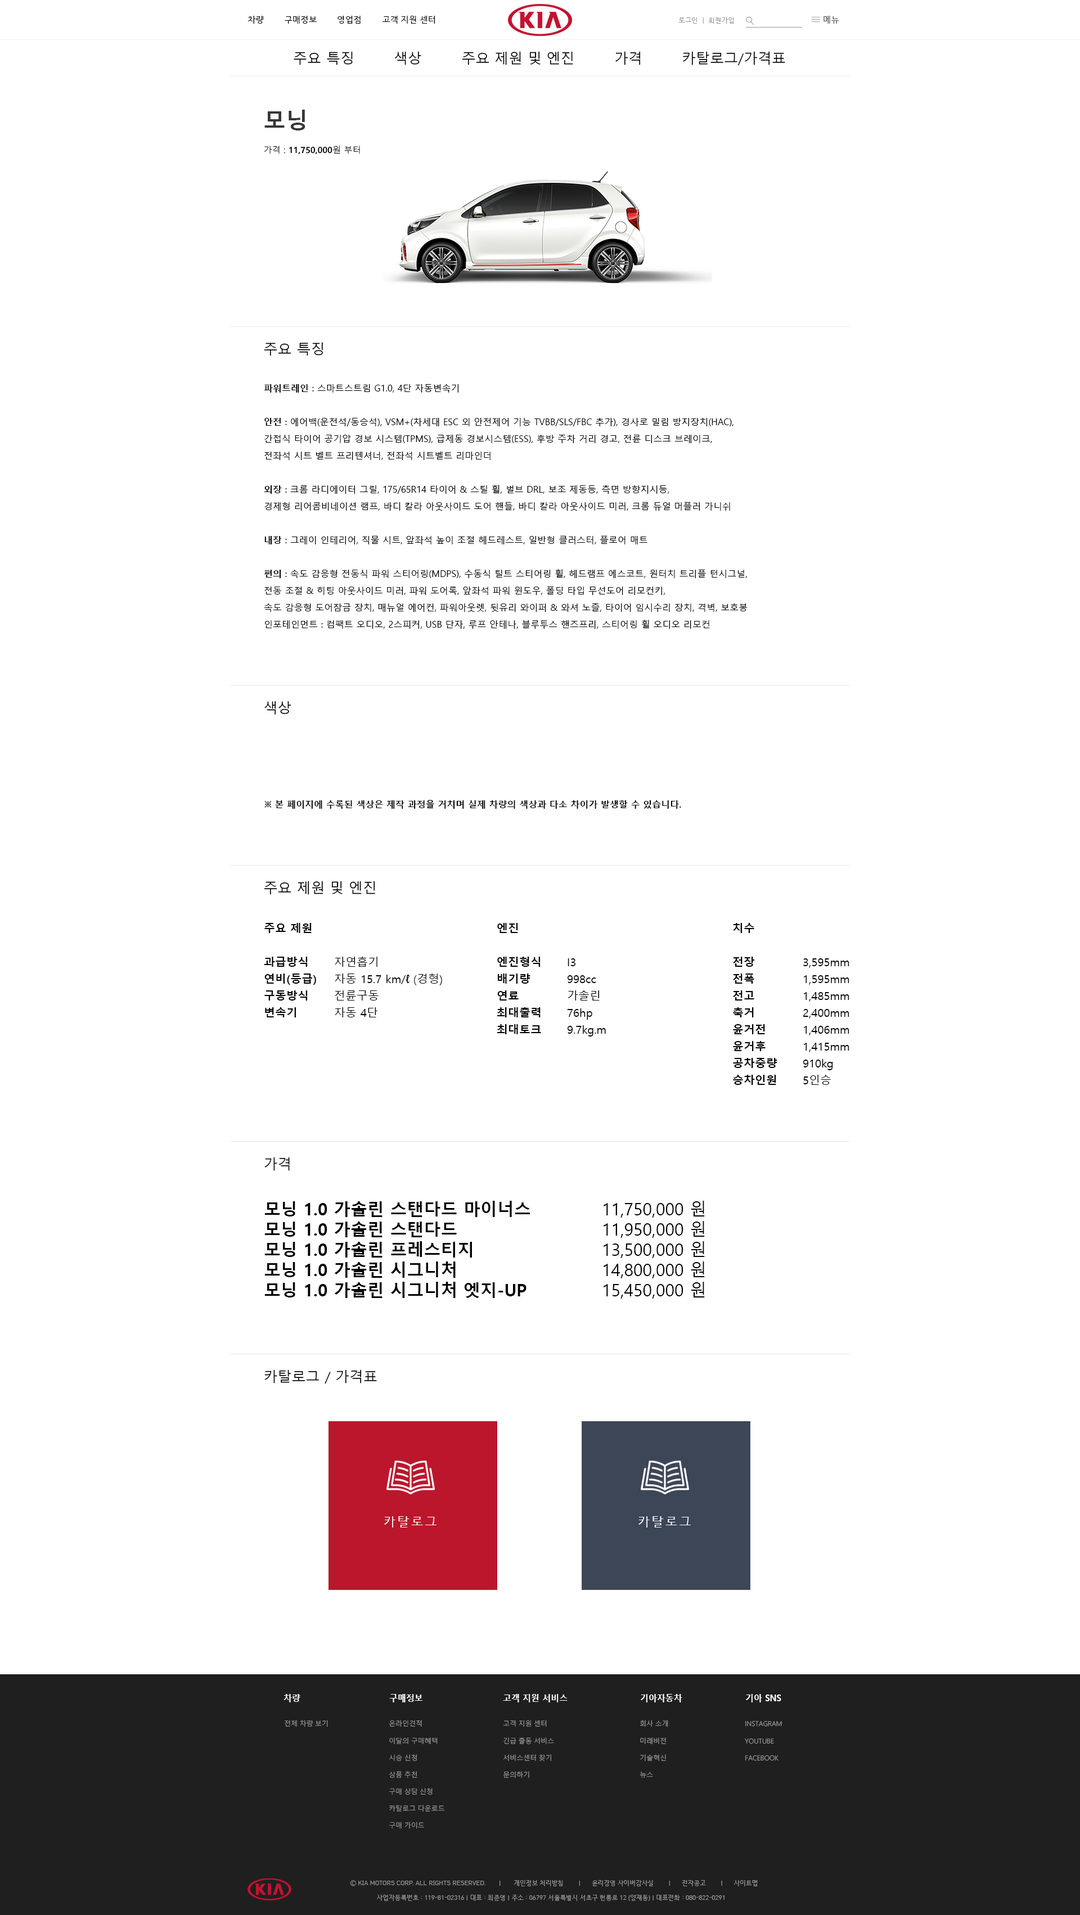
<style>
.page{position:relative;width:1080px;height:1915px;background:#ffffff}
.page>*{position:absolute;margin:0}
.t1{font:8.4px "HCRDotum";color:#000000}
.t2{font:6.8px "HCRDotum";color:#979797}
.t3{font:8.4px "HCRDotum";color:#4c4c4c}
.t4{font:14px "MalgunGothic";color:#000000}
.t5{font:22.5px "MalgunGothicBold";color:#363636}
.t6{font:8.4px "MalgunGothicBold";color:#000000}
.t7{font:8.4px "MalgunGothic";color:#000000}
.t8{font:13.9px "MalgunGothic";color:#000000}
.t9{font:9px/16.9px "MalgunGothic";color:#000000}
.t10{font:9px/16.9px "MalgunGothicBold";color:#000000}
.t11{font:9px "MalgunGothicBold";color:#000000}
.t12{font:11.2px/16.9px "MalgunGothicBold";color:#000000}
.t13{font:11.2px/16.9px "MalgunGothic";color:#000000}
.t14{font:16.9px "MalgunGothicBold";color:#000000}
.t15{font:16.9px "MalgunGothic";color:#000000}
.t16{font:12.5px "HCRDotum";letter-spacing:0.14em;color:#ffffff}
.t17{font:8.7px "MalgunGothicBold";color:#ffffff;scale:0.96 1}
.t18{font:6.8px "MalgunGothic-Semilight";color:#979797}
.t19{font:6.8px/17px "MalgunGothic-Semilight";color:#979797}
.t20{font:6.2px "HCRDotum";color:#999999}
</style>
<div class="page">
<p class="t1" style="left:248px;top:16px;width:187px;height:8px">차량        구매정보        영업점        고객 지원 센터</p>
<p class="t2" style="left:678px;top:17px;width:56px;height:7px">로그인  |  회원가입</p>
<p class="t3" style="left:824px;top:16px;width:15px;height:8px">메뉴</p>
<p class="t4" style="left:294px;top:51px;width:491px;height:15px">주요 특징        색상        주요 제원 및 엔진        가격        카탈로그/가격표</p>
<p class="t5" style="left:264px;top:110px;width:41px;height:20px">모닝</p>
<p class="t6" style="left:264px;top:146px;width:96px;height:9px"><span class="t7">가격 : </span>11,750,000<span class="t7">원 부터</span></p>
<p class="t8" style="left:264px;top:342px;width:59px;height:14px">주요 특징</p>
<p class="t9" style="left:264px;top:384px;width:484px;height:245px"><span class="t10">파워트레인</span> : 스마트스트림 G1.0, 4단 자동변속기<br><br><span class="t10">안전</span> : 에어백(운전석/동승석), VSM+(차세대 ESC 외 안전제어 기능 TVBB/SLS/FBC 추가), 경사로 밀림 방지장치(HAC),<br>간접식 타이어 공기압 경보 시스템(TPMS), 급제동 경보시스템(ESS), 후방 주차 거리 경고, 전륜 디스크 브레이크,<br>전좌석 시트 벨트 프리텐셔너, 전좌석 시트벨트 리마인더<br><br><span class="t10">외장</span> : 크롬 라디에이터 그릴, 175/65R14 타이어 &amp; 스틸 휠, 벌브 DRL, 보조 제동등, 측면 방향지시등,<br>경제형 리어콤비네이션 램프, 바디 칼라 아웃사이드 도어 핸들, 바디 칼라 아웃사이드 미러, 크롬 듀얼 머플러 가니쉬<br><br><span class="t10">내장</span> : 그레이 인테리어, 직물 시트, 앞좌석 높이 조절 헤드레스트, 일반형 클러스터, 플로어 매트<br><br><span class="t10">편의</span> : 속도 감응형 전동식 파워 스티어링(MDPS), 수동식 틸트 스티어링 휠, 헤드램프 에스코트, 원터치 트리플 턴시그널,<br>전동 조절 &amp; 히팅 아웃사이드 미러, 파워 도어록, 앞좌석 파워 윈도우, 폴딩 타입 무선도어 리모컨키,<br>속도 감응형 도어잠금 장치, 매뉴얼 에어컨, 파워아웃렛, 뒷유리 와이퍼 &amp; 와셔 노즐, 타이어 임시수리 장치, 격벽, 보호봉<br>인포테인먼트 : 컴팩트 오디오, 2스피커, USB 단자, 루프 안테나, 블루투스 핸즈프리, 스티어링 휠 오디오 리모컨</p>
<p class="t8" style="left:264px;top:701px;width:27px;height:14px">색상</p>
<p class="t11" style="left:264px;top:800px;width:417px;height:9px">※ 본 페이지에 수록된 색상은 제작 과정을 거치며 실제 차량의 색상과 다소 차이가 발생할 수 있습니다.</p>
<p class="t8" style="left:264px;top:881px;width:111px;height:14px">주요 제원 및 엔진</p>
<p class="t12" style="left:264px;top:923px;width:52px;height:95px">주요 제원<br><br>과급방식<br>연비(등급)<br>구동방식<br>변속기</p>
<p class="t12" style="left:497px;top:923px;width:44px;height:111px">엔진<br><br>엔진형식<br>배기량<br>연료<br>최대출력<br>최대토크</p>
<p class="t12" style="left:733px;top:923px;width:44px;height:162px">치수<br><br>전장<br>전폭<br>전고<br>축거<br>윤거전<br>윤거후<br>공차중량<br>승차인원</p>
<p class="t13" style="left:335px;top:957px;width:107px;height:61px">자연흡기<br>자동 15.7 km/ℓ (경형)<br>전륜구동<br>자동 4단</p>
<p class="t13" style="left:567px;top:958px;width:39px;height:79px">I3<br>998cc<br>가솔린<br>76hp<br>9.7kg.m</p>
<p class="t13" style="left:803px;top:958px;width:46px;height:127px">3,595mm<br>1,595mm<br>1,485mm<br>2,400mm<br>1,406mm<br>1,415mm<br>910kg<br>5인승</p>
<p class="t8" style="left:264px;top:1157px;width:26px;height:14px">가격</p>
<p class="t14" style="left:264px;top:1201px;width:266px;height:97px">모닝 1.0 가솔린 스탠다드 마이너스 <br>모닝 1.0 가솔린 스탠다드<br>모닝 1.0 가솔린 프레스티지<br>모닝 1.0 가솔린 시그니처<br>모닝 1.0 가솔린 시그니처 엣지-UP</p>
<p class="t15" style="left:604px;top:1201px;width:101px;height:98px">11,750,000 원<br>11,950,000 원<br>13,500,000 원<br>14,800,000 원<br>15,450,000 원</p>
<p class="t8" style="left:264px;top:1370px;width:113px;height:14px">카탈로그 / 가격표</p>
<p class="t16" style="left:384px;top:1516px;width:52px;height:12px">카탈로그</p>
<p class="t16" style="left:638px;top:1516px;width:53px;height:12px">카탈로그</p>
<p class="t17" style="left:284px;top:1694px;width:16px;height:9px">차량</p>
<p class="t17" style="left:389px;top:1694px;width:33px;height:9px">구매정보</p>
<p class="t17" style="left:503px;top:1694px;width:65px;height:9px">고객 지원 서비스</p>
<p class="t17" style="left:641px;top:1694px;width:41px;height:9px">기아자동차</p>
<p class="t17" style="left:746px;top:1694px;width:35px;height:9px">기아 SNS</p>
<p class="t18" style="left:285px;top:1720px;width:43px;height:7px">전체 차량 보기</p>
<p class="t19" style="left:389px;top:1720px;width:56px;height:109px">온라인견적<br>이달의 구매혜택<br>시승 신청<br>상품 추천<br>구매 상담 신청<br>카탈로그 다운로드<br>구매 가이드</p>
<p class="t19" style="left:503px;top:1720px;width:51px;height:59px">고객 지원 센터<br>긴급 출동 서비스<br>서비스센터 찾기<br>문의하기</p>
<p class="t19" style="left:640px;top:1720px;width:28px;height:59px">회사 소개<br>미래비전<br>기술혁신<br>뉴스</p>
<p class="t19" style="left:745px;top:1721px;width:37px;height:40px">INSTAGRAM<br>YOUTUBE<br>FACEBOOK</p>
<p class="t20" style="left:350px;top:1880px;width:408px;height:7px">Ⓒ KIA MOTORS CORP. ALL RIGHTS RESERVED.       |       개인정보 처리방침        |      윤리경영 사이버감사실        |      전자공고        |      사이트맵</p>
<p class="t20" style="left:377px;top:1895px;width:347px;height:6px">사업자등록번호 : 119-81-02316 | 대표 : 최준영 | 주소 : 06797 서울특별시 서초구 헌릉로 12 (양재동) | 대표전화 : 080-822-0291</p>
</div>
